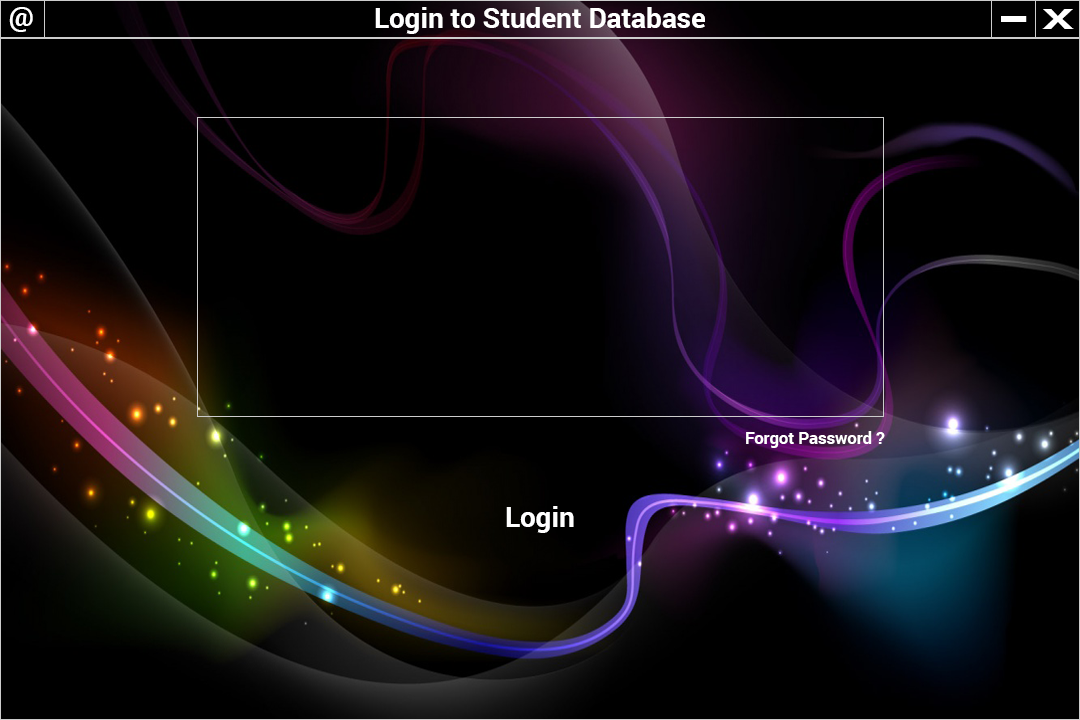
<style>
.page{position:relative;width:1080px;height:720px;background:#000000}
.page>*{position:absolute;margin:0}
.t1{font:27.8px "Roboto-Bold";color:#ffffff}
.t2{font:50px "Roboto-Bold";color:#ffffff;scale:1.81 1}
.t3{font:27.8px "Roboto-Bold";color:#ffffff;scale:1.81 1}
.t4{font:16.7px "Roboto-Bold";color:#ffffff}
</style>
<div class="page">
<p class="t1" style="left:9px;top:7px;width:24px;height:25px">@</p>
<p class="t1" style="left:375px;top:7px;width:330px;height:27px">Login to Student Database</p>
<p class="t2" style="left:1001px;top:16px;width:26px;height:6px">-</p>
<p class="t3" style="left:1042px;top:9px;width:32px;height:20px">X</p>
<p class="t4" style="left:746px;top:431px;width:139px;height:17px">Forgot Password ?</p>
<p class="t1" style="left:506px;top:506px;width:68px;height:27px">Login</p>
</div>
